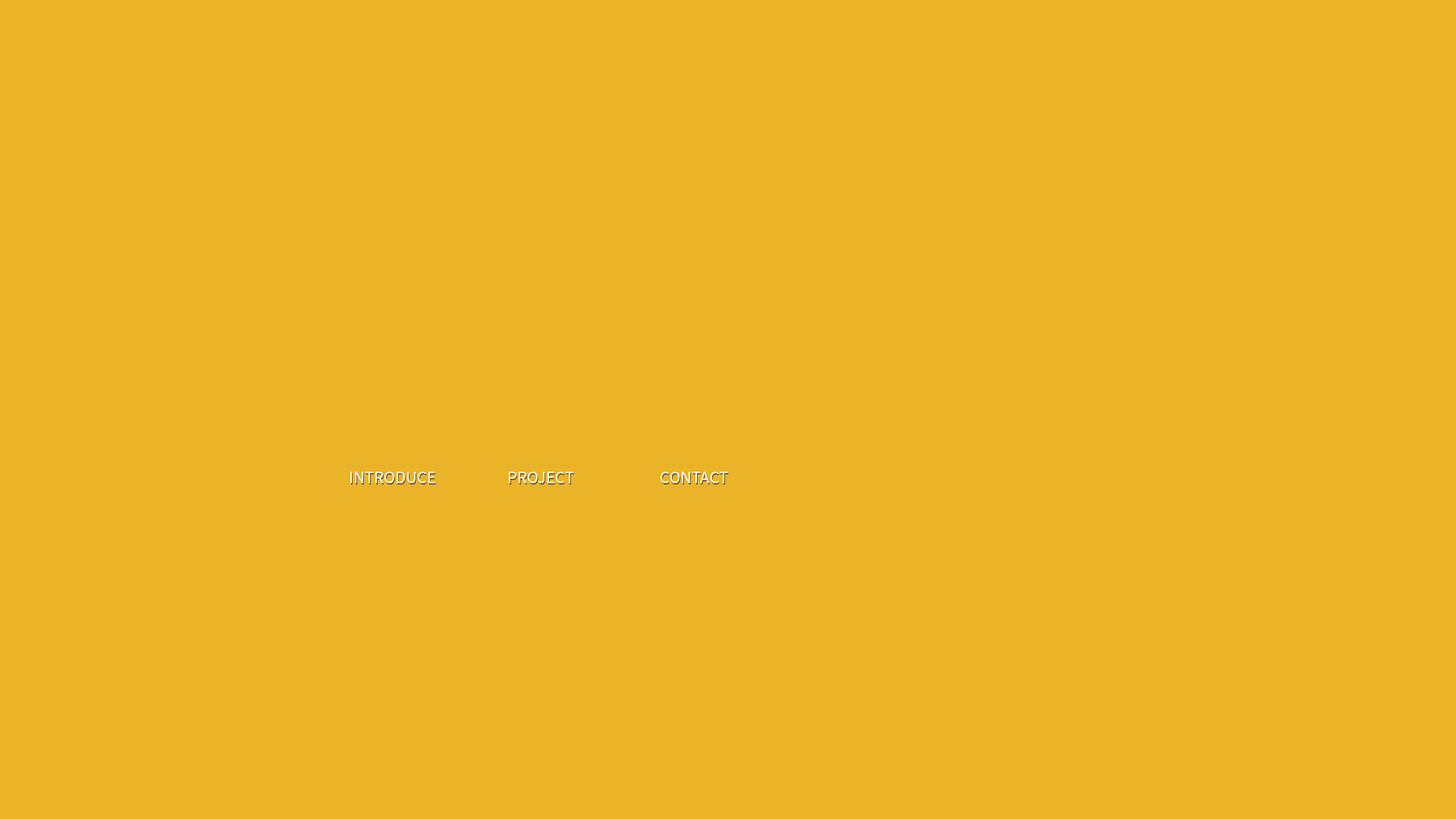
<style>
.page{position:relative;width:1456px;height:819px;background:#ebb328}
.page>*{position:absolute;margin:0}
.t1{font:15.3px "NotoSansKR-Regular";letter-spacing:0.025em;color:#ffffff}
</style>
<div class="page">
<p class="t1" style="left:350px;top:472px;width:85px;height:11px">INTRODUCE</p>
<p class="t1" style="left:509px;top:472px;width:64px;height:11px">PROJECT</p>
<p class="t1" style="left:660px;top:472px;width:68px;height:11px">CONTACT</p>
</div>
